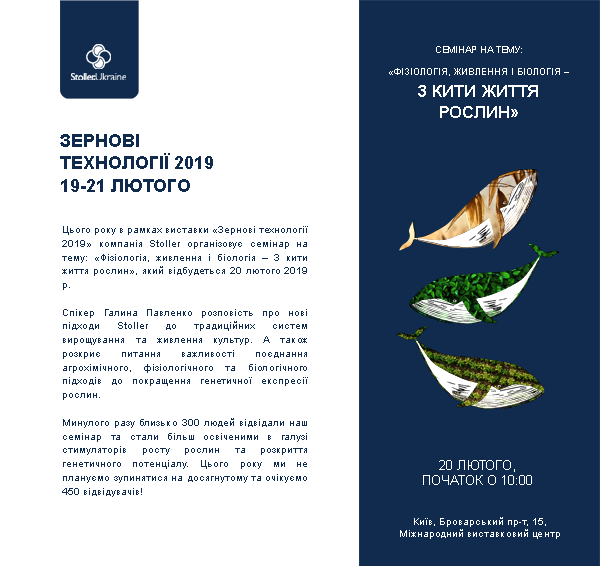
<style>
.page{position:relative;width:600px;height:566px;background:#ffffff}
.page>*{position:absolute;margin:0}
.t1{font:8.7px "ArialMT";color:#ffffff;text-transform:uppercase}
.t2{font:8.7px/7.8px "Arial-BoldMT";color:#ffffff;text-transform:uppercase}
.t3{font:17.3px/21.5px "Arial-BoldMT";color:#ffffff;text-transform:uppercase}
.t4{font:18.3px "Arial-BoldMT";color:#102b4d;text-transform:uppercase}
.t5{font:9.8px/13.8px "ArialMT";color:#102b4d}
.t6{font:12.6px "ArialMT";color:#ffffff;text-transform:uppercase}
.t7{font:10.1px "ArialMT";color:#ffffff}
</style>
<div class="page">
<p class="t1" style="left:436px;top:46px;width:86px;height:7px">семінар на тему:</p>
<p class="t2" style="left:389px;top:68px;width:180px;height:50px;text-align:center">«Фізіологія, живлення і біологія –<br><span class="t3">3 кити життя<br>рослин»</span></p>
<p class="t4" style="left:60px;top:134px;width:153px;height:35px">Зернові<br>технології 2019</p>
<p class="t4" style="left:61px;top:179px;width:129px;height:13px">19-21 лютого</p>
<p class="t5" style="left:62px;top:226px;width:246px;height:271px;text-align:justify">Цього року в рамках виставки «Зернові технології 2019» компанія Stoller організовує семінар на тему: «Фізіологія, живлення і біологія – 3 кити життя рослин», який відбудеться 20 лютого 2019 р.<br><br>Спікер Галина Павленко розповість про нові підходи Stoller до традиційних систем вирощування та живлення культур. А також розкриє питання важливості поєднання агрохімічного, фізіологічного та біологічного підходів до покращення генетичної експресії рослин.<br><br>Минулого разу близько 300 людей відвідали наш семінар та стали більш освіченими в галузі стимуляторів росту рослин та розкриття генетичного потенціалу. Цього року ми не плануємо зупинятися на досягнутому та очікуємо 450 відвідувачів!</p>
<p class="t6" style="left:423px;top:460px;width:109px;height:25px;text-align:center">20 лютого,<br>Початок о 10:00</p>
<p class="t7" style="left:400px;top:517px;width:160px;height:22px;text-align:center">Київ, Броварський пр-т, 15,<br>Міжнародний виставковий центр</p>
</div>
